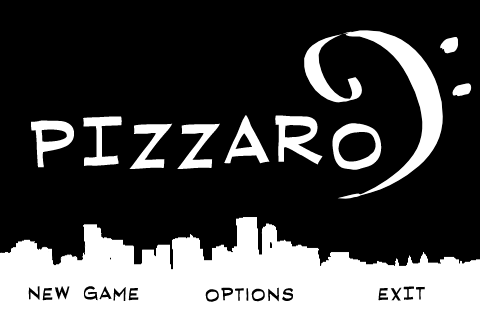
<style>
.page{position:relative;width:480px;height:320px;background:#000000}
.page>*{position:absolute;margin:0}
.t1{font:90px "RedStateBlueStateBB";letter-spacing:0.075em;color:#ffffff}
.t2{font:24px "RedStateBlueStateBB";letter-spacing:0.075em;color:#000000}
</style>
<div class="page">
<p class="t1" style="left:31px;top:115px;width:351px;height:55px">PIZZARO</p>
<p class="t2" style="left:28px;top:286px;width:111px;height:15px">NEW GAME</p>
<p class="t2" style="left:205px;top:287px;width:88px;height:15px">Options</p>
<p class="t2" style="left:378px;top:286px;width:47px;height:15px">EXIT</p>
</div>
